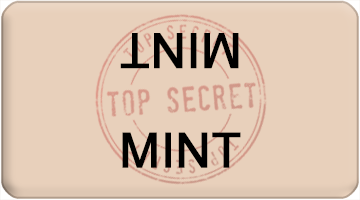
<style>
.page{position:relative;width:360px;height:200px;background:#e8d0bb}
.page>*{position:absolute;margin:0}
.t1{font:48px "ArialMT";color:#000000;font-weight:bold}
</style>
<div class="page">
<p class="t1" style="left:120px;top:33px;width:119px;height:36px;rotate:180deg">MINT</p>
<p class="t1" style="left:122px;top:132px;width:119px;height:36px">MINT</p>
</div>
